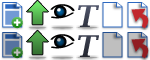
<style>
.page{position:relative;width:150px;height:60px;background:#ffffff}
.page>*{position:absolute;margin:0}
.t1{font:30px "LucidaBright-DemiItalic";letter-spacing:-0.025em;color:#404555}
.t2{font:30px "LucidaBright-DemiItalic";letter-spacing:-0.025em;color:#303340}
</style>
<div class="page">
<p class="t1" style="left:78px;top:5px;width:21px;height:22px">T</p>
<p class="t2" style="left:78px;top:35px;width:21px;height:22px">T</p>
</div>
